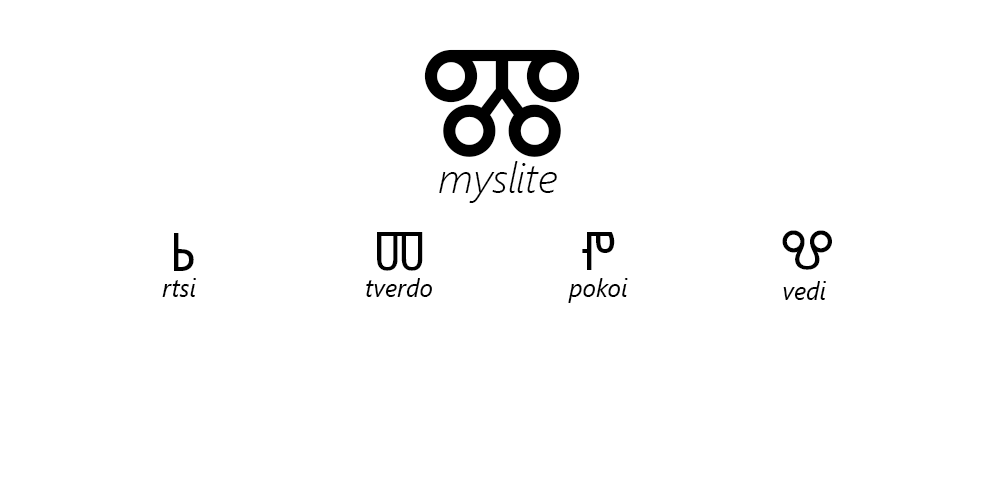
<style>
.page{position:relative;width:1000px;height:500px;background:#ffffff}
.page>*{position:absolute;margin:0}
.t1{font:150px "SegoeUISymbol";color:#000000}
.t2{font:41.7px "SegoeUI-LightItalic";color:#000000}
.t3{font:54.2px "SegoeUISymbol";color:#000000}
.t4{font:25px "SegoeUI-Italic";color:#000000}
</style>
<div class="page">
<p class="t1" style="left:424px;top:49px;width:156px;height:108px">Ⰿ</p>
<p class="t2" style="left:439px;top:161px;width:118px;height:42px">myslite</p>
<p class="t3" style="left:174px;top:233px;width:20px;height:38px">Ⱃ</p>
<p class="t3" style="left:377px;top:232px;width:46px;height:39px">Ⱅ</p>
<p class="t3" style="left:582px;top:232px;width:33px;height:38px">Ⱂ</p>
<p class="t3" style="left:782px;top:230px;width:50px;height:40px">Ⰲ</p>
<p class="t4" style="left:162px;top:278px;width:34px;height:19px">rtsi</p>
<p class="t4" style="left:366px;top:278px;width:66px;height:19px">tverdo</p>
<p class="t4" style="left:568px;top:278px;width:60px;height:25px">pokoi</p>
<p class="t4" style="left:783px;top:281px;width:43px;height:19px">vedi</p>
</div>
